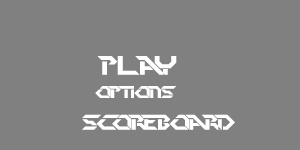
<style>
.page{position:relative;width:300px;height:150px;background:#808080}
.page>*{position:absolute;margin:0}
.t1{font:26.3px "PerfectDark(BRK)";color:#ffffff}
.t2{font:16.7px "PerfectDark(BRK)";color:#ffffff}
.t3{font:20.8px "PerfectDark(BRK)";color:#ffffff}
</style>
<div class="page">
<p class="t1" style="left:97px;top:56px;width:80px;height:19px">play</p>
<p class="t2" style="left:95px;top:86px;width:81px;height:12px">options</p>
<p class="t3" style="left:82px;top:114px;width:153px;height:16px">scoreboards</p>
</div>
